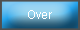
<style>
.page{position:relative;width:80px;height:30px}
.page>*{position:absolute;margin:0}
.t1{font:12px "ArialMT";color:#ffffff}
</style>
<div class="page">
<p class="t1" style="left:28px;top:10px;width:24px;height:9px">Over</p>
</div>
